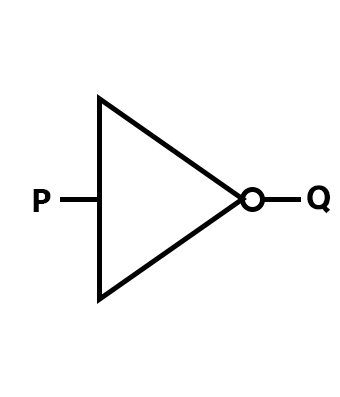
<style>
.page{position:relative;width:340px;height:397px;background:#ffffff}
.page>*{position:absolute;margin:0}
.t1{font:33.3px "SegoeUIVariable-BoldText";color:#000000}
</style>
<div class="page">
<p class="t1" style="left:307px;top:185px;width:23px;height:29px">Q</p>
<p class="t1" style="left:33px;top:189px;width:18px;height:23px">P</p>
</div>
